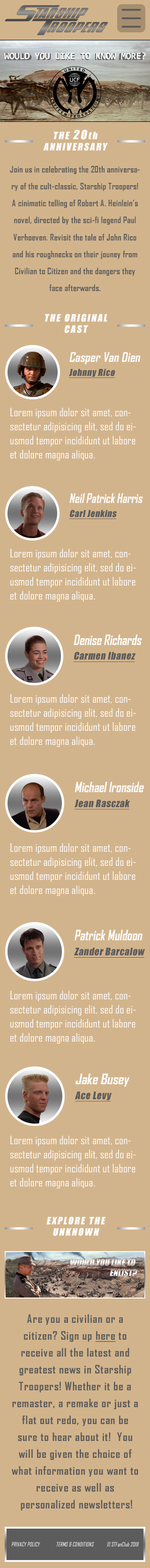
<style>
.page{position:relative;width:150px;height:1568px;background:#d2b48c}
.page>*{position:absolute;margin:0}
.t1{font:9.5px "Impact";letter-spacing:0.125em;color:#fefefe;font-style:italic}
.t2{font:11.9px "Impact";letter-spacing:0.125em;color:#fefefe;font-style:italic}
.t3{font:8.5px/17px "AgencyFB-Bold";letter-spacing:0.025em;color:#5c5c5c}
.t4{font:12.8px/13.8px "AgencyFB-Bold";color:#fefefe;font-style:italic}
.t5{font:8.9px/13.8px "Impact";letter-spacing:0.025em;color:#5c5c5c;font-style:italic;text-decoration:underline}
.t6{font:11.3px/14.1px "AgencyFB-Reg";letter-spacing:0.01em;color:#ffffff}
.t7{font:12.8px/13.8px "AgencyFB-Bold";color:#fefefe;font-style:italic;scale:0.9 1}
.t8{font:13.7px/14.9px "AgencyFB-Bold";color:#fefefe;font-style:italic;scale:0.9 1}
.t9{font:9.6px/14.9px "Impact";letter-spacing:0.025em;color:#5c5c5c;font-style:italic;text-decoration:underline}
.t10{font:13.8px/15px "AgencyFB-Bold";color:#fefefe;font-style:italic;scale:0.9 1}
.t11{font:9.7px/15px "Impact";letter-spacing:0.025em;color:#5c5c5c;font-style:italic;text-decoration:underline}
.t12{font:13.9px/15.1px "AgencyFB-Bold";color:#fefefe;font-style:italic}
.t13{font:9.7px/15.1px "Impact";letter-spacing:0.025em;color:#5c5c5c;font-style:italic;text-decoration:underline}
.t14{font:11.3px/16.9px "AgencyFB-Bold";letter-spacing:0.05em;color:#5c5c5c}
.t15{font:11.3px/16.9px "AgencyFB-Bold";letter-spacing:0.05em;color:#5c5c5c;text-decoration:underline}
.t16{font:5.6px "AgencyFB-Reg";color:#ffffff;font-style:italic}
</style>
<div class="page">
<p class="t1" style="left:43px;top:129px;width:65px;height:22px;text-align:center">THE <span class="t2">20</span>th<br>ANNIVERSARY</p>
<p class="t3" style="left:10px;top:166px;width:130px;height:125px;text-align:center">Join us in celebrating the 20th anniversary of the cult-classic, Starship Troopers! A cinimatic telling of Robert A. Heinlein’s novel, directed by the sci-fi legend Paul Verhoeven. Revisit the tale of John Rico and his roughnecks on their jouney from Civilian to Citizen and the dangers they face afterwards.</p>
<p class="t1" style="left:45px;top:314px;width:62px;height:19px;text-align:center">THE ORIGINAL CAST</p>
<p class="t4" style="left:68px;top:352px;width:73px;height:26px">Casper Van Dien  <span class="t5">Johnny Rico</span></p>
<p class="t6" style="left:10px;top:407px;width:126px;height:54px">Lorem ipsum dolor sit amet, consectetur adipisicing elit, sed do eiusmod tempor incididunt ut labore et dolore magna aliqua.</p>
<p class="t7" style="left:69px;top:493px;width:74px;height:26px">Neil Patrick Harris  <span class="t5">Carl Jenkins</span></p>
<p class="t6" style="left:10px;top:548px;width:126px;height:54px">Lorem ipsum dolor sit amet, consectetur adipisicing elit, sed do eiusmod tempor incididunt ut labore et dolore magna aliqua.</p>
<p class="t6" style="left:10px;top:694px;width:126px;height:53px">Lorem ipsum dolor sit amet, consectetur adipisicing elit, sed do eiusmod tempor incididunt ut labore et dolore magna aliqua.</p>
<p class="t8" style="left:74px;top:781px;width:70px;height:29px">Michael Ironside  <span class="t9">Jean Rasczak</span></p>
<p class="t6" style="left:10px;top:843px;width:126px;height:53px">Lorem ipsum dolor sit amet, consectetur adipisicing elit, sed do eiusmod tempor incididunt ut labore et dolore magna aliqua.</p>
<p class="t10" style="left:74px;top:930px;width:71px;height:28px">Patrick Muldoon  <span class="t11">Zander Barcalow</span></p>
<p class="t6" style="left:10px;top:990px;width:126px;height:54px">Lorem ipsum dolor sit amet, consectetur adipisicing elit, sed do eiusmod tempor incididunt ut labore et dolore magna aliqua.</p>
<p class="t12" style="left:75px;top:1073px;width:55px;height:29px">Jake Busey<br><span class="t13">Ace Levy</span></p>
<p class="t6" style="left:10px;top:1135px;width:126px;height:54px">Lorem ipsum dolor sit amet, consectetur adipisicing elit, sed do eiusmod tempor incididunt ut labore et dolore magna aliqua.</p>
<p class="t1" style="left:46px;top:1216px;width:60px;height:20px;text-align:center">EXPLORE THE<br>UNKNOWN</p>
<p class="t14" style="left:12px;top:1314px;width:126px;height:197px;text-align:center">Are you a civilian or a <br>citizen? Sign up <span class="t15">here</span> to <br>receive all the latest and greatest news in Starship Troopers! Whether it be a remaster, a remake or just a flat out redo, you can be sure to hear about it!  You will be given the choice of what information you want to <br>receive as well as<br> personalized newsletters!</p>
<p class="t16" style="left:11px;top:1542px;width:128px;height:4px">PRIVACY POLICY             TERMS &amp; CONDITIONS            © STFanClub 2018</p>
</div>
